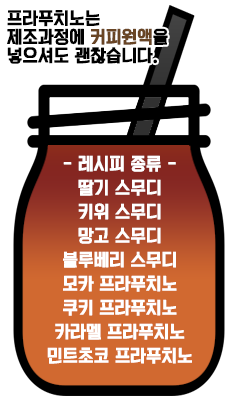
<style>
.page{position:relative;width:238px;height:400px;background:#ffffff}
.page>*{position:absolute;margin:0}
.t1{font:16px/18.7px "KoreanYNSJG4-R";color:#000000;font-weight:bold}
.t2{font:16px/18.7px "KoreanYNSJG4-R";color:#694525;font-weight:bold}
.t3{font:16px/24px "KoreanYNSJG4-R";color:#ffffff;font-weight:bold}
</style>
<div class="page">
<p class="t1" style="left:7px;top:10px;width:161px;height:54px">프라푸치노는 <br>제조과정에 <span class="t2">커피원액</span>을 <br>넣으셔도 괜찮습니다.</p>
<p class="t3" style="left:47px;top:155px;width:145px;height:209px;text-align:center">- 레시피 종류 -<br>딸기 스무디<br>키위 스무디<br>망고 스무디<br>블루베리 스무디<br>모카 프라푸치노<br>쿠키 프라푸치노<br>카라멜 프라푸치노<br>민트초코 프라푸치노</p>
</div>
